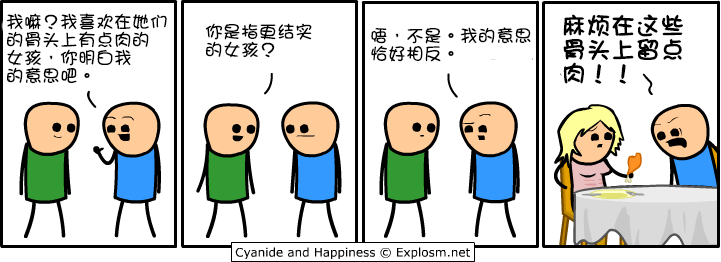
<style>
.page{position:relative;width:721px;height:262px;background:#ffffff}
.page>*{position:absolute;margin:0}
.t1{font:18px/18px "DFGirl";color:#000000}
.t2{font:24px/24px "DFGirl";color:#000000;font-weight:bold}
</style>
<div class="page">
<p class="t1" style="left:6px;top:13px;width:161px;height:71px">我嘛？我喜欢在她们<br>的骨头上有点肉的<br>女孩，你明白我<br>的意思吧。</p>
<p class="t2" style="left:563px;top:14px;width:120px;height:70px">麻烦在这些<br>骨头上留点<br>肉！！</p>
<p class="t1" style="left:205px;top:23px;width:107px;height:35px">你是指更结实<br>的女孩？</p>
<p class="t1" style="left:371px;top:27px;width:160px;height:35px">唔，不是。我的意思<br>恰好相反。</p>
</div>
